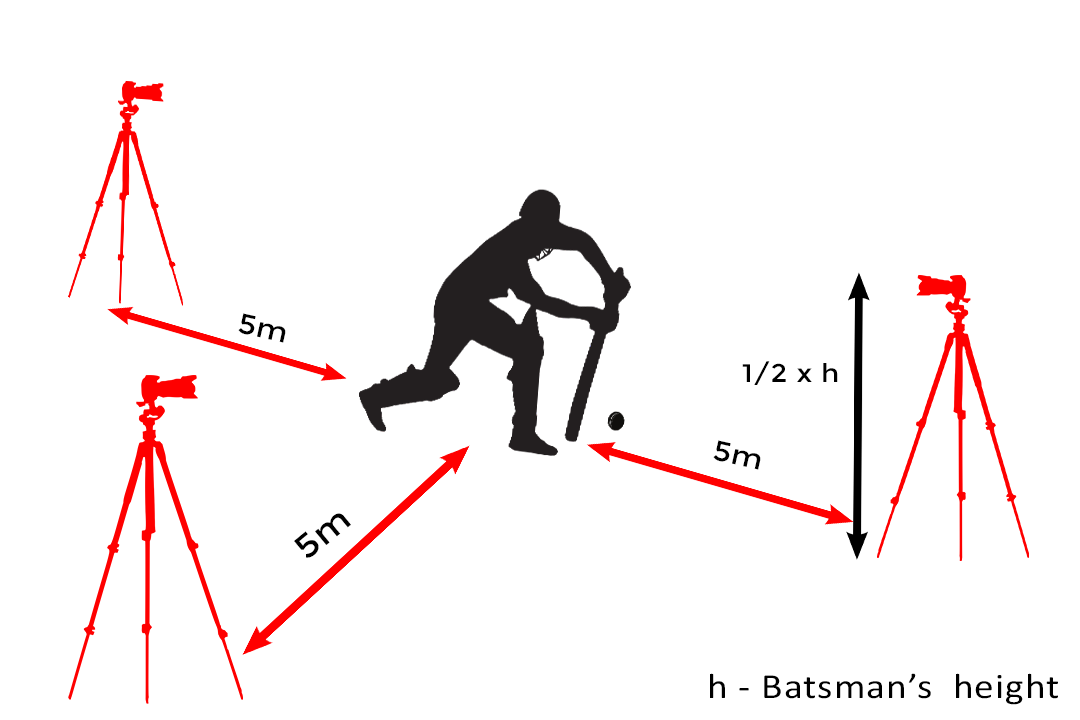
<style>
.page{position:relative;width:1080px;height:720px;background:#ffffff}
.page>*{position:absolute;margin:0}
.t1{font:28px "Montserrat-Regular";letter-spacing:0.025em;color:#000000;scale:1.11 1}
.t2{font:25.4px "Montserrat-Regular";letter-spacing:0.025em;color:#000000;scale:1.11 1}
.t3{font:33.4px "Montserrat-Regular";letter-spacing:0.025em;color:#000000;scale:1.11 1}
.t4{font:35.5px "Calibri";letter-spacing:0.025em;color:#000000;scale:1.11 1}
</style>
<div class="page">
<p class="t1" style="left:238px;top:313px;width:48px;height:30px;rotate:13deg">5m</p>
<p class="t2" style="left:742px;top:361px;width:96px;height:24px">1/2 x h</p>
<p class="t1" style="left:713px;top:440px;width:48px;height:30px;rotate:13deg">5m</p>
<p class="t3" style="left:294px;top:513px;width:57px;height:45px;rotate:-40deg">5m</p>
<p class="t4" style="left:710px;top:673px;width:348px;height:32px">h - Batsman’s  height</p>
</div>
